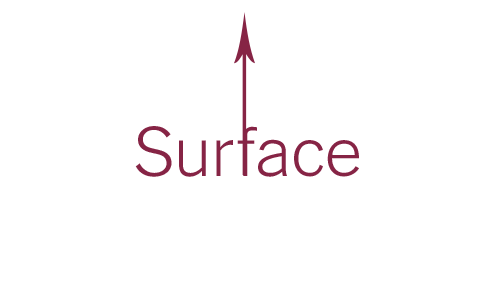
<style>
.page{position:relative;width:500px;height:300px;background:#ffffff}
.page>*{position:absolute;margin:0}
.t1{font:70px "NYTFranklin-Light";color:#862445}
</style>
<div class="page">
<p class="t1" style="left:135px;top:126px;width:224px;height:51px">Surface</p>
</div>
